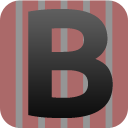
<style>
.page{position:relative;width:128px;height:128px;background:#ab6969}
.page>*{position:absolute;margin:0}
.t1{font:154.2px "Ubuntu-Bold"}
</style>
<div class="page">
<p class="t1" style="left:28px;top:9px;width:85px;height:109px">B</p>
</div>
